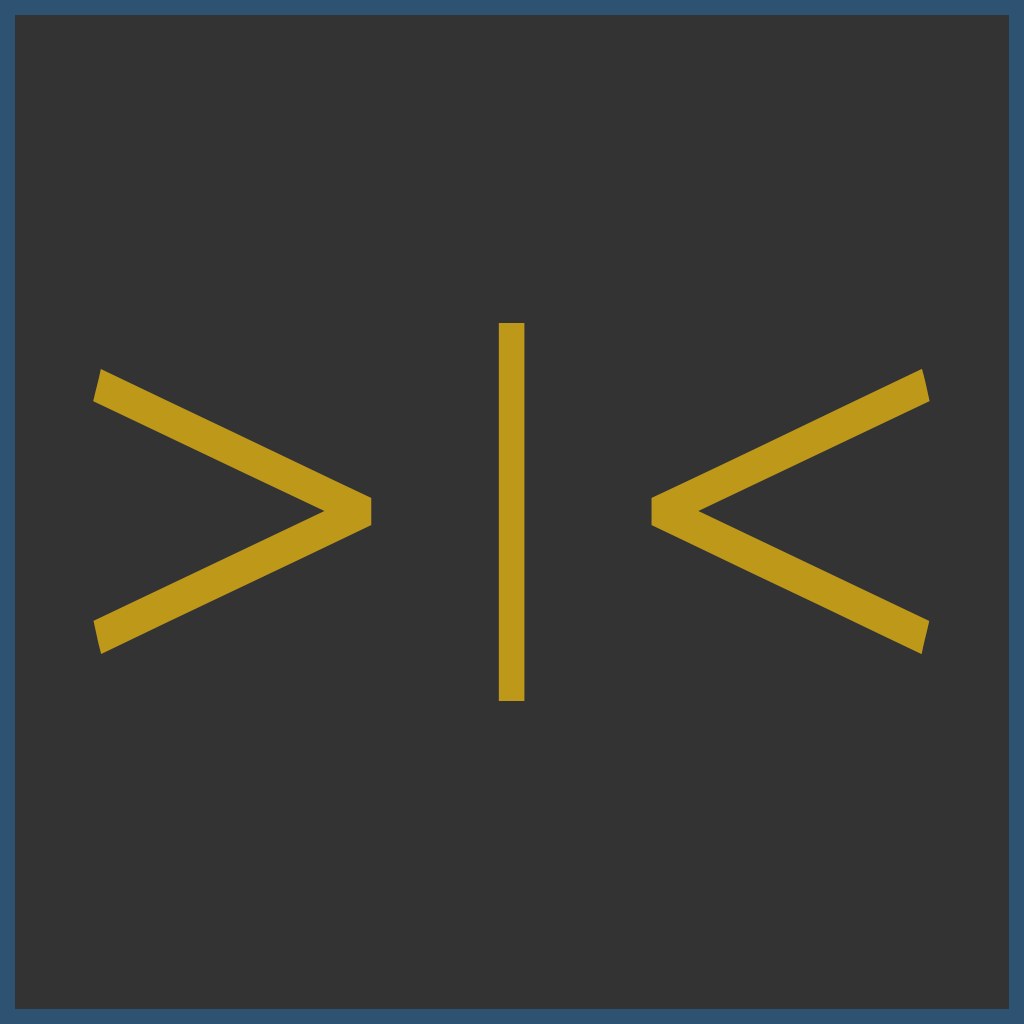
<style>
.page{position:relative;width:1024px;height:1024px;background:#333333}
.page>*{position:absolute;margin:0}
.t1{font:675px "Microsoft-Yi-Baiti";color:#be9919}
</style>
<div class="page">
<p class="t1" style="left:93px;top:323px;width:837px;height:378px">&gt;|&lt;</p>
</div>
